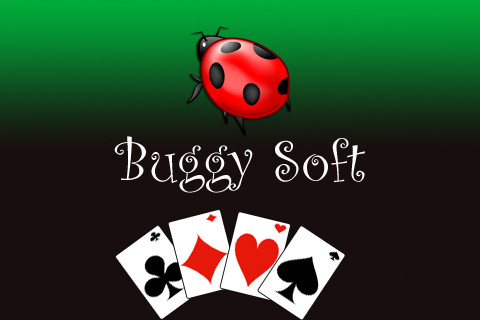
<style>
.page{position:relative;width:480px;height:320px}
.page>*{position:absolute;margin:0}
.t1{font:60px "CurlzMT";color:#fdfdfd}
</style>
<div class="page">
<p class="t1" style="left:114px;top:136px;width:251px;height:57px">Buggy Soft</p>
</div>
